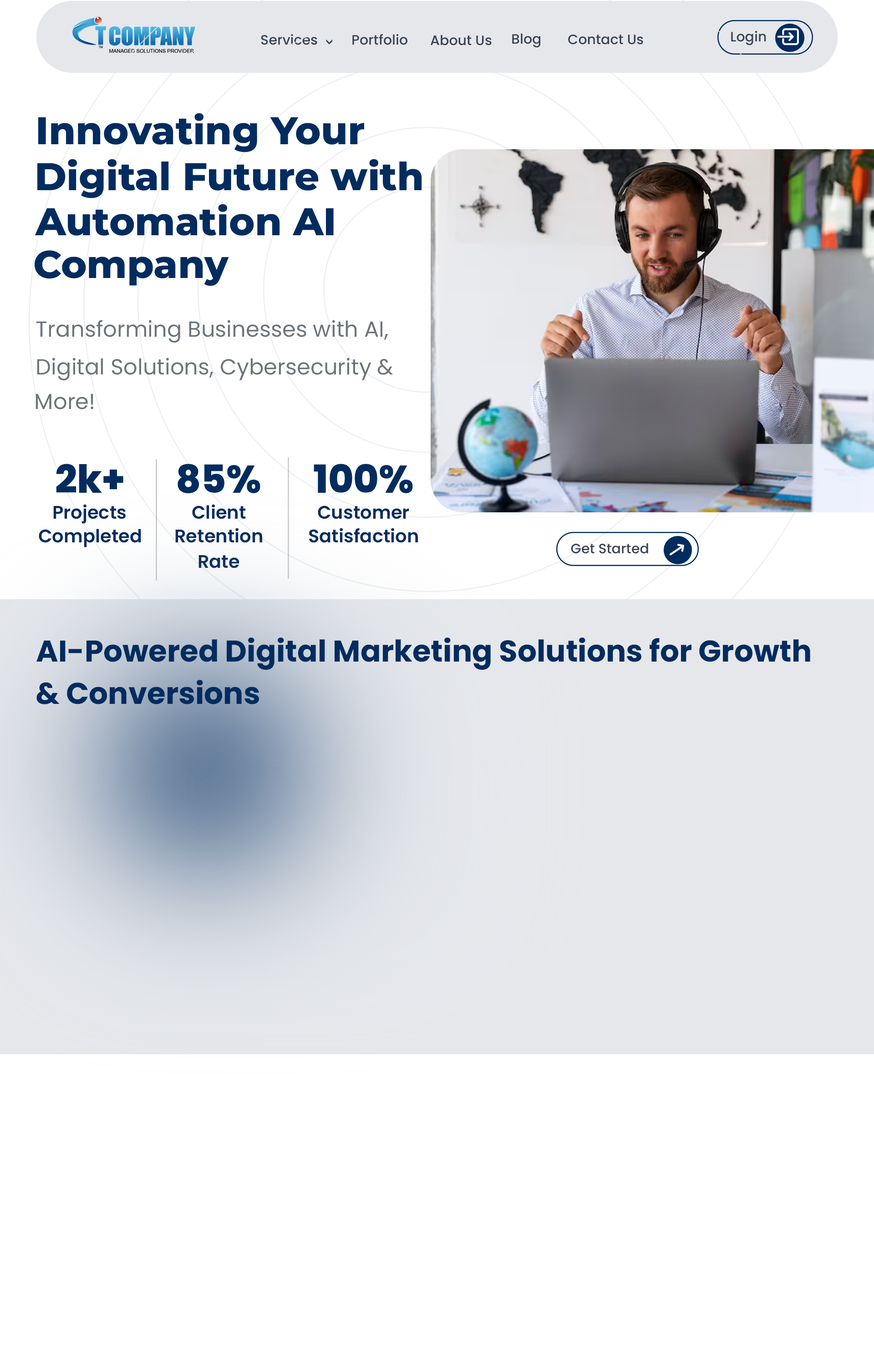
<style>
.page{position:relative;width:874px;height:1365px;background:#ffffff}
.page>*{position:absolute;margin:0}
.t1{font:13.6px "Poppins-Medium";color:#374151}
.t2{font:13.7px "Poppins-Medium";color:#374151}
.t3{font:38.7px "Montserrat-ExtraBold";color:#012c5f}
.t4{font:21.8px "Poppins-Regular";color:#6c757d}
.t5{font:38.7px "Poppins-ExtraBold";color:#012c5f}
.t6{font:18.2px "Poppins-SemiBold";color:#012c5f}
.t7{font:30px "Poppins-Bold";color:#012c5f}
</style>
<div class="page">
<p class="t1" style="left:261px;top:34px;width:56px;height:11px">Services</p>
<p class="t2" style="left:326px;top:39px;width:7px;height:6px;rotate:90deg">&gt;</p>
<p class="t1" style="left:352px;top:34px;width:55px;height:11px">Portfolio</p>
<p class="t1" style="left:430px;top:35px;width:61px;height:10px">About Us</p>
<p class="t1" style="left:512px;top:33px;width:28px;height:15px">Blog</p>
<p class="t1" style="left:568px;top:35px;width:75px;height:10px">Contact Us</p>
<p class="t1" style="left:731px;top:31px;width:35px;height:14px">Login</p>
<p class="t3" style="left:38px;top:113px;width:326px;height:39px">Innovating Your</p>
<p class="t3" style="left:37px;top:159px;width:385px;height:39px">Digital Future with</p>
<p class="t3" style="left:35px;top:204px;width:299px;height:32px">Automation AI</p>
<p class="t3" style="left:35px;top:250px;width:194px;height:36px">Company</p>
<p class="t4" style="left:36px;top:320px;width:352px;height:23px">Transforming Businesses with AI,</p>
<p class="t4" style="left:37px;top:358px;width:356px;height:22px">Digital Solutions, Cybersecurity &amp;</p>
<p class="t4" style="left:35px;top:394px;width:58px;height:15px">More!</p>
<p class="t5" style="left:56px;top:464px;width:67px;height:29px">2k+</p>
<p class="t5" style="left:177px;top:464px;width:83px;height:29px">85%</p>
<p class="t5" style="left:313px;top:464px;width:100px;height:29px">100%</p>
<p class="t6" style="left:53px;top:504px;width:73px;height:20px">Projects</p>
<p class="t6" style="left:192px;top:504px;width:54px;height:15px">Client</p>
<p class="t6" style="left:318px;top:505px;width:91px;height:14px">Customer</p>
<p class="t6" style="left:39px;top:529px;width:102px;height:18px">Completed</p>
<p class="t6" style="left:175px;top:528px;width:87px;height:15px">Retention</p>
<p class="t6" style="left:309px;top:528px;width:109px;height:15px">Satisfaction</p>
<p class="t1" style="left:571px;top:543px;width:77px;height:11px">Get Started</p>
<p class="t6" style="left:198px;top:555px;width:41px;height:13px">Rate</p>
<p class="t7" style="left:36px;top:637px;width:774px;height:33px">AI-Powered Digital Marketing Solutions for Growth</p>
<p class="t7" style="left:36px;top:680px;width:223px;height:24px">&amp; Conversions</p>
</div>
